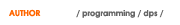
<style>
.page{position:relative;width:180px;height:25px;background:#ffffff}
.page>*{position:absolute;margin:0}
.t1{font:8px "Atlanta-Demi";color:#ff6600}
.t2{font:8px "Atlanta-Demi";color:#666666}
</style>
<div class="page">
<p class="t1" style="left:9px;top:9px;width:32px;height:8px">AUTHOR</p>
<p class="t2" style="left:76px;top:10px;width:88px;height:8px"><span class="t1"> </span>/ programming / dps /</p>
</div>
